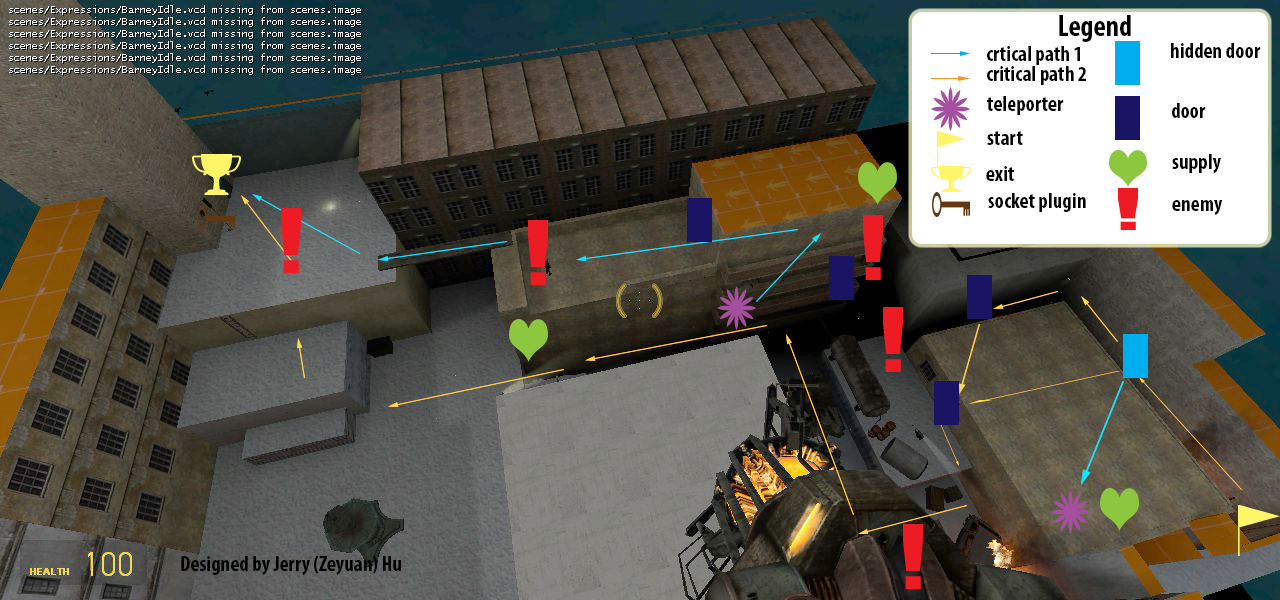
<style>
.page{position:relative;width:1280px;height:600px}
.page>*{position:absolute;margin:0}
.t1{font:30px "MyriadPro-BoldCond";color:#010101;scale:0.96 1}
.t2{font:42.2px "MyriadPro-BoldCond";color:#f0e931;scale:0.96 1}
.t3{font:21.3px "MyriadPro-BoldCond";color:#000000}
.t4{font:21.3px "MyriadPro-BoldCond";color:#010101}
</style>
<div class="page">
<p class="t1" style="left:1059px;top:15px;width:72px;height:27px"><span class="t2">   </span>Legend</p>
<p class="t3" style="left:987px;top:46px;width:93px;height:19px">crtical path 1</p>
<p class="t3" style="left:1171px;top:43px;width:90px;height:15px">hidden door</p>
<p class="t3" style="left:987px;top:66px;width:99px;height:19px">critical path 2</p>
<p class="t4" style="left:987px;top:96px;width:77px;height:19px">teleporter</p>
<p class="t3" style="left:1172px;top:103px;width:34px;height:15px">door</p>
<p class="t3" style="left:987px;top:131px;width:36px;height:14px">start</p>
<p class="t3" style="left:1172px;top:154px;width:49px;height:19px">supply</p>
<p class="t3" style="left:986px;top:166px;width:28px;height:15px">exit</p>
<p class="t3" style="left:988px;top:193px;width:98px;height:19px">socket plugin</p>
<p class="t3" style="left:1172px;top:200px;width:51px;height:15px">enemy</p>
<p class="t3" style="left:181px;top:556px;width:220px;height:19px">Designed by Jerry (Zeyuan) Hu</p>
</div>
